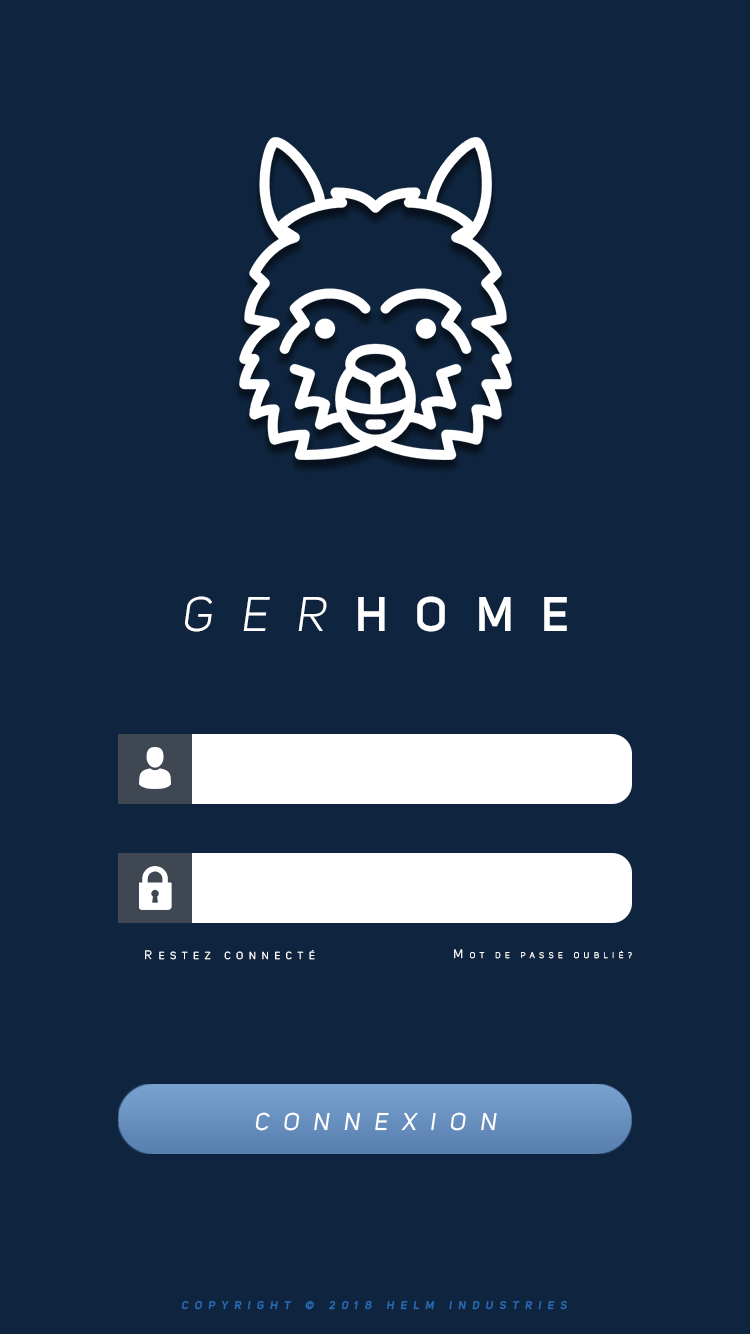
<style>
.page{position:relative;width:750px;height:1334px;background:#0f253f}
.page>*{position:absolute;margin:0}
.t1{font:48px "UniSansSemiBold";letter-spacing:0.585em;color:#ffffff;text-transform:uppercase}
.t2{font:48px "UniSansBookItalic";letter-spacing:0.585em;color:#ffffff;text-transform:uppercase}
.t3{font:10px "UniSansBook";letter-spacing:0.585em;color:#ffffff;text-transform:uppercase}
.t4{font:12px "UniSansBook";letter-spacing:0.585em;color:#ffffff;text-transform:uppercase}
.t5{font:8px "UniSansBook";letter-spacing:0.585em;color:#ffffff;text-transform:uppercase}
.t6{font:24px "UniSansRegularItalic";letter-spacing:0.585em;color:#ffffff;text-transform:uppercase}
.t7{font:11px "UniSansSemiBoldItalic";letter-spacing:0.585em;color:#2a69b4;text-transform:uppercase}
</style>
<div class="page">
<p class="t1" style="left:185px;top:596px;width:382px;height:36px"><span class="t2">Ger</span>home</p>
<p class="t3" style="left:145px;top:950px;width:170px;height:10px"><span class="t4">r</span>estez connecté</p>
<p class="t5" style="left:454px;top:949px;width:178px;height:10px"><span class="t4">M</span>ot de passe oublié?</p>
<p class="t6" style="left:255px;top:1112px;width:242px;height:19px">connexion</p>
<p class="t7" style="left:182px;top:1300px;width:385px;height:10px">Copyright © 2018 helm industries</p>
</div>
